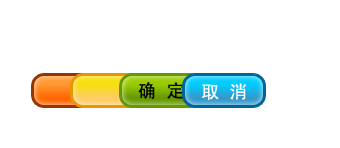
<style>
.page{position:relative;width:340px;height:148px;background:#ffffff}
.page>*{position:absolute;margin:0}
.t1{font:18px "SimHei";letter-spacing:0.04em;color:#000000}
.t2{font:18px "SimHei";letter-spacing:0.04em;color:#ffffff}
</style>
<div class="page">
<p class="t1" style="left:138px;top:82px;width:46px;height:17px">确 定</p>
<p class="t2" style="left:202px;top:83px;width:45px;height:17px">取 消</p>
</div>
